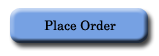
<style>
.page{position:relative;width:159px;height:56px;background:#ffffff}
.page>*{position:absolute;margin:0}
.t1{font:13px "Century";color:#000000}
</style>
<div class="page">
<p class="t1" style="left:44px;top:20px;width:72px;height:11px">Place Order</p>
</div>
